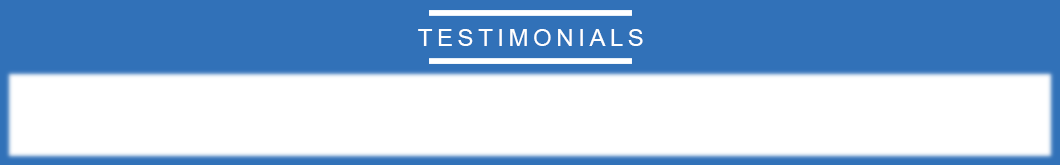
<style>
.page{position:relative;width:1060px;height:165px;background:#ffffff}
.page>*{position:absolute;margin:0}
.t1{font:24.2px "ArialMT";letter-spacing:0.19em;color:#ffffff}
</style>
<div class="page">
<p class="t1" style="left:418px;top:29px;width:225px;height:17px">TESTIMONIALS</p>
</div>
